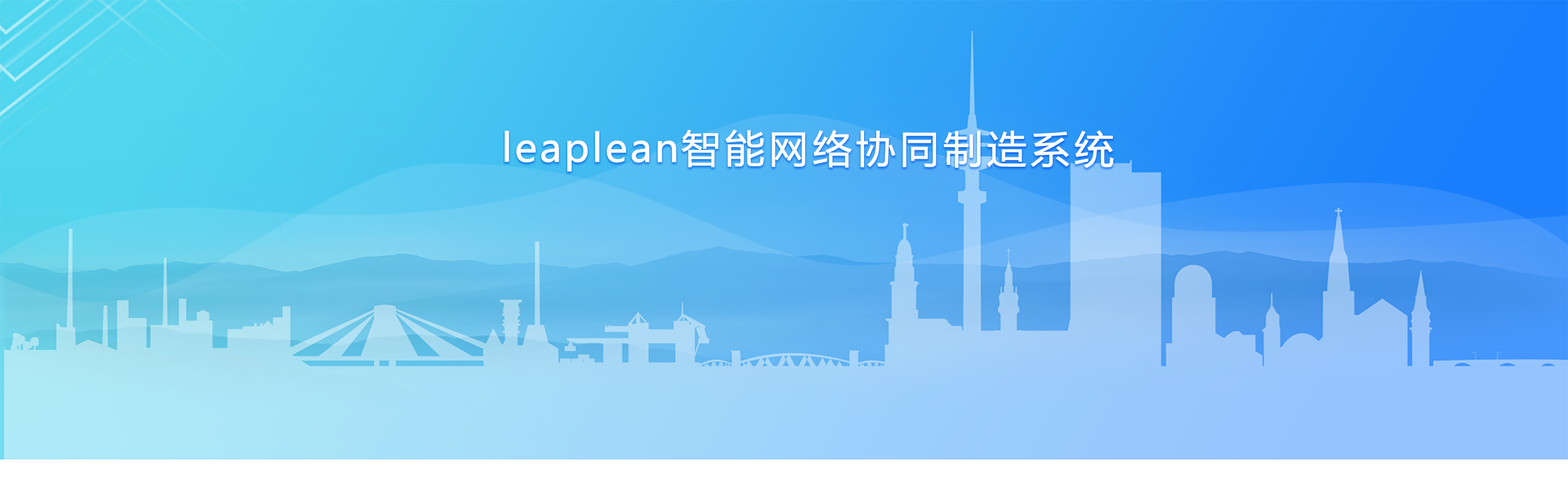
<style>
.page{position:relative;width:1568px;height:480px}
.page>*{position:absolute;margin:0}
.t1{font:38.1px "MicrosoftYaHei";letter-spacing:0.08em;color:#ffffff;font-weight:bold;scale:1.03 1}
.t2{font:38.1px "MicrosoftYaHei";letter-spacing:0.04em;color:#ffffff;font-weight:bold;scale:1.03 1}
</style>
<div class="page">
<p class="t1" style="left:505px;top:130px;width:609px;height:41px"><span class="t2">leaplean</span>智能网络协同制造系统</p>
</div>
